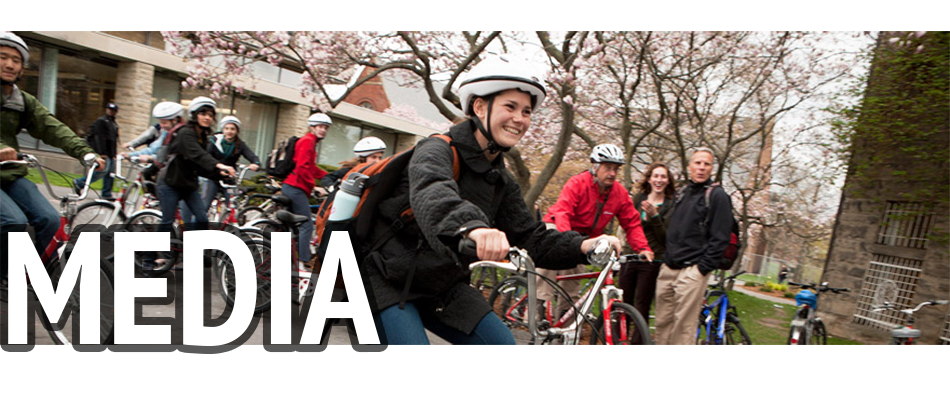
<style>
.page{position:relative;width:950px;height:400px;background:#ffffff}
.page>*{position:absolute;margin:0}
.t1{font:160px "PTSans-NarrowBold";color:#ffffff}
</style>
<div class="page">
<p class="t1" style="left:8px;top:230px;width:373px;height:116px">MEDIA</p>
</div>
